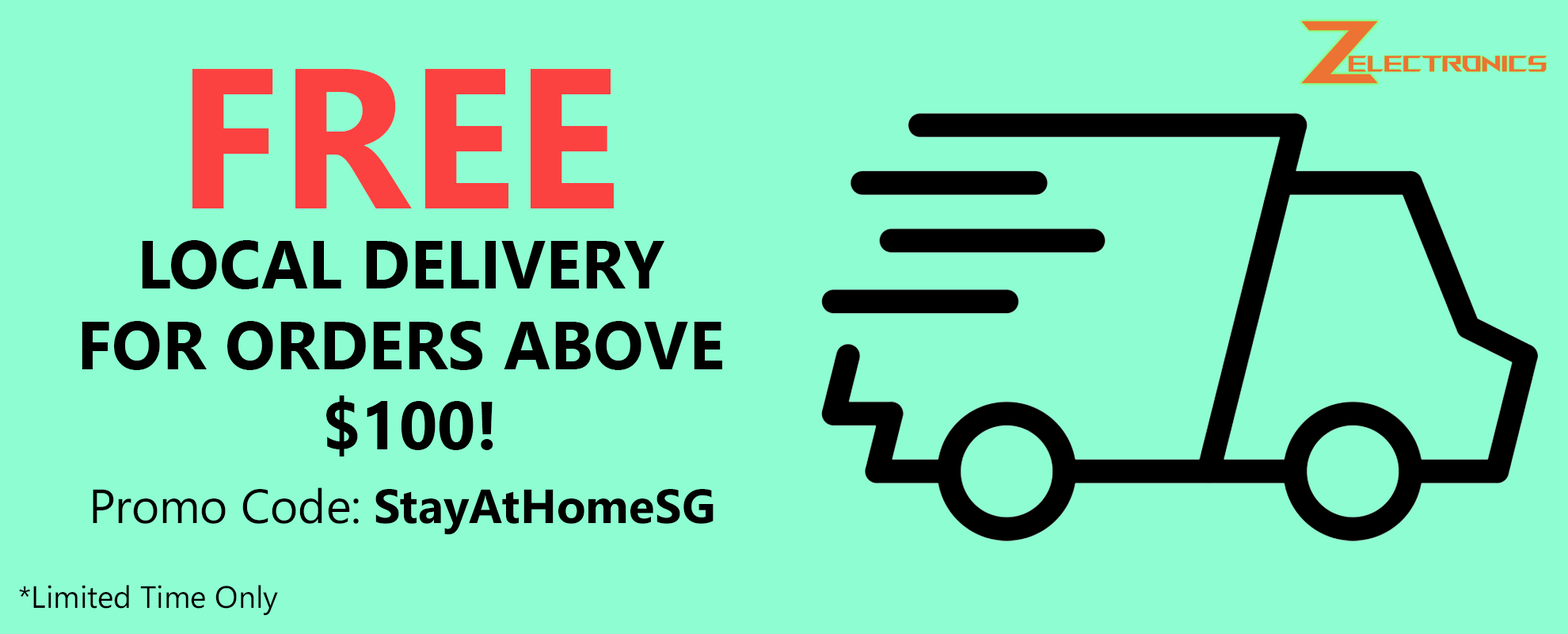
<style>
.page{position:relative;width:1568px;height:634px;background:#8efdd2}
.page>*{position:absolute;margin:0}
.t1{font:67px "NirmalaUI-Bold";color:#000000}
.t2{font:198.5px "NirmalaUI-Bold";color:#fc4141}
.t3{font:47.6px "NirmalaUI-Bold";color:#000000}
.t4{font:47.6px "NirmalaUI";color:#000000}
.t5{font:30.9px "NirmalaUI";color:#000000}
</style>
<div class="page">
<p class="t1" style="left:82px;top:68px;width:640px;height:388px;text-align:center"><span class="t2">FREE <br></span>LOCAL DELIVERY <br>FOR ORDERS ABOVE <br>$100!</p>
<p class="t3" style="left:93px;top:487px;width:621px;height:48px"><span class="t4">Promo Code:</span> StayAtHomeSG</p>
<p class="t5" style="left:19px;top:584px;width:259px;height:31px">*Limited Time Only</p>
</div>
